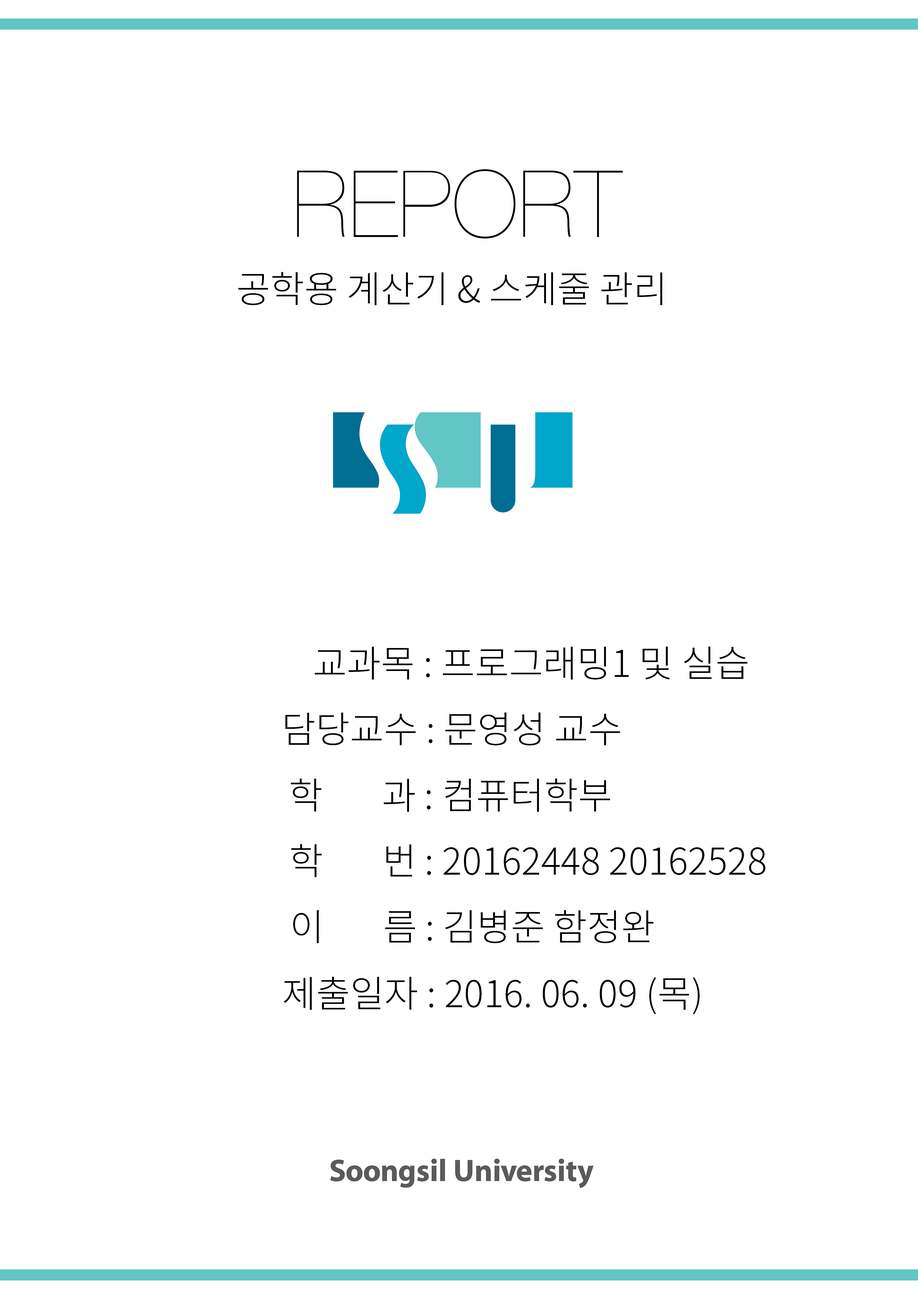
<style>
.page{position:relative;width:918px;height:1299px;background:#ffffff}
.page>*{position:absolute;margin:0}
.t1{font:37px "NotoSansCJKkr-Light";color:#000000}
</style>
<div class="page">
<p class="t1" style="left:238px;top:272px;width:424px;height:33px">공학용 계산기 &amp; 스케줄 관리</p>
<p class="t1" style="left:315px;top:646px;width:432px;height:34px">교과목 : 프로그래밍1 및 실습</p>
<p class="t1" style="left:285px;top:712px;width:335px;height:33px">담당교수 : 문영성 교수</p>
<p class="t1" style="left:291px;top:778px;width:319px;height:34px">학     과 : 컴퓨터학부</p>
<p class="t1" style="left:291px;top:844px;width:475px;height:33px">학     번 : 20162448 20162528</p>
<p class="t1" style="left:293px;top:910px;width:361px;height:33px">이      름 : 김병준 함정완</p>
<p class="t1" style="left:284px;top:976px;width:416px;height:38px">제출일자 : 2016. 06. 09 (목)</p>
</div>
